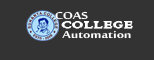
<style>
.page{position:relative;width:154px;height:60px;background:#333333}
.page>*{position:absolute;margin:0}
.t1{font:13.9px "SakkalMajalla-Bold";color:#ffffff;scale:1.25 1}
.t2{font:13.9px "ColonnaMT";color:#ffffff;font-weight:bold;scale:1.25 1}
</style>
<div class="page">
<p class="t1" style="left:55px;top:11px;width:33px;height:9px">COAS</p>
<p class="t2" style="left:61px;top:21px;width:72px;height:8px">COLLEGE</p>
<p class="t1" style="left:62px;top:30px;width:69px;height:9px">Automation</p>
</div>
